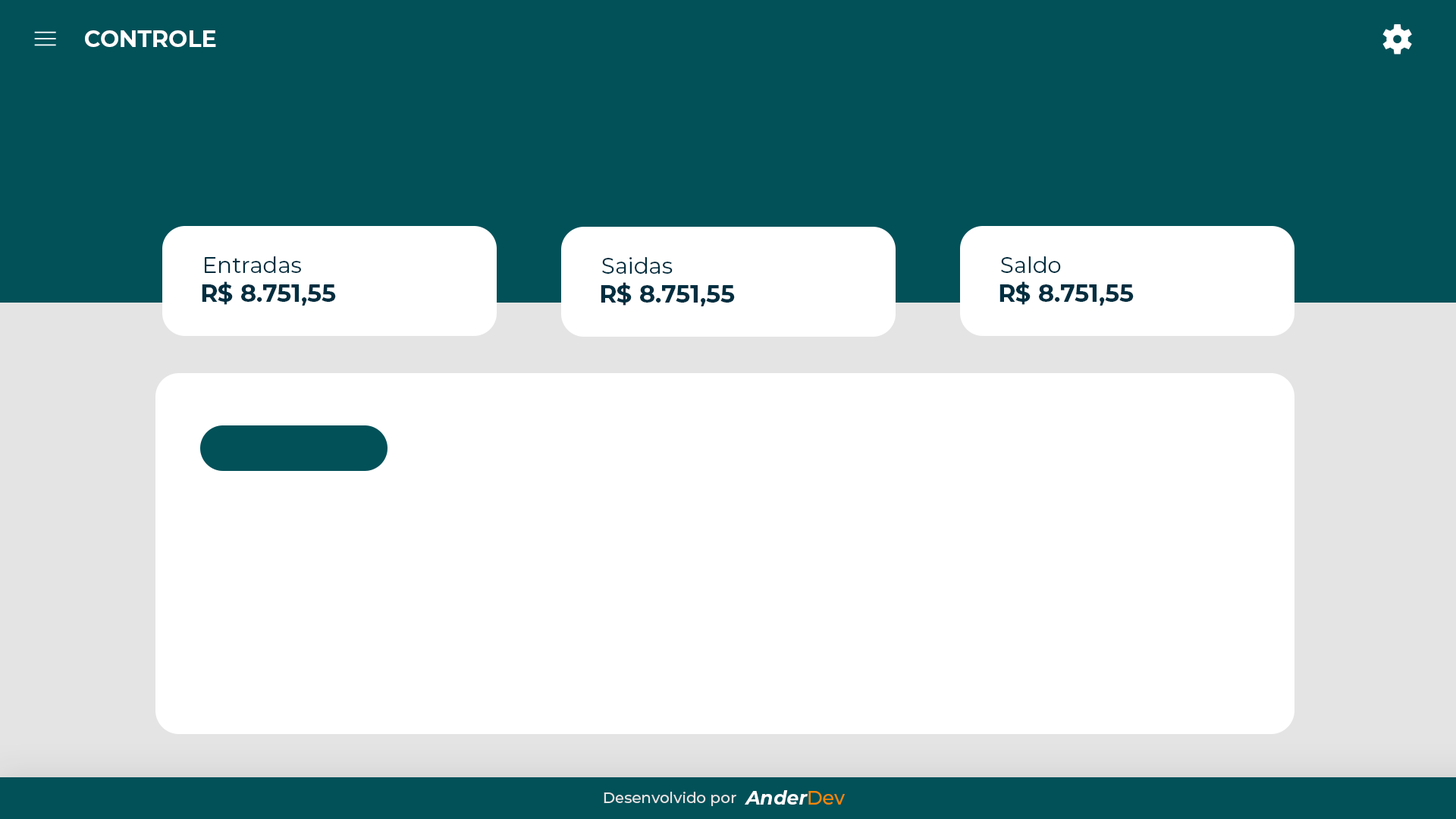
<style>
.page{position:relative;width:1456px;height:819px;background:#ffffff}
.page>*{position:absolute;margin:0}
.t1{font:22.7px "Montserrat-Bold";color:#ffffff}
.t2{font:22px "Montserrat-Regular";color:#012e40}
.t3{font:24.3px "Montserrat-Bold";color:#012e40}
.t4{font:15.2px "Montserrat-Medium";color:#e4e4e4}
.t5{font:19px "Montserrat-BoldItalic";color:#ffffff}
.t6{font:19px "Montserrat-Medium";color:#f28705}
</style>
<div class="page">
<p class="t1" style="left:85px;top:30px;width:131px;height:17px">CONTROLE</p>
<p class="t2" style="left:205px;top:256px;width:96px;height:17px">Entradas</p>
<p class="t2" style="left:602px;top:257px;width:71px;height:17px">Saidas</p>
<p class="t2" style="left:1001px;top:256px;width:60px;height:17px">Saldo</p>
<p class="t3" style="left:202px;top:281px;width:134px;height:25px">R$ 8.751,55</p>
<p class="t3" style="left:999px;top:281px;width:135px;height:25px">R$ 8.751,55</p>
<p class="t3" style="left:601px;top:282px;width:134px;height:24px">R$ 8.751,55</p>
<p class="t4" style="left:604px;top:792px;width:132px;height:14px">Desenvolvido por</p>
<p class="t5" style="left:745px;top:790px;width:100px;height:15px">Ander<span class="t6">Dev</span></p>
</div>
